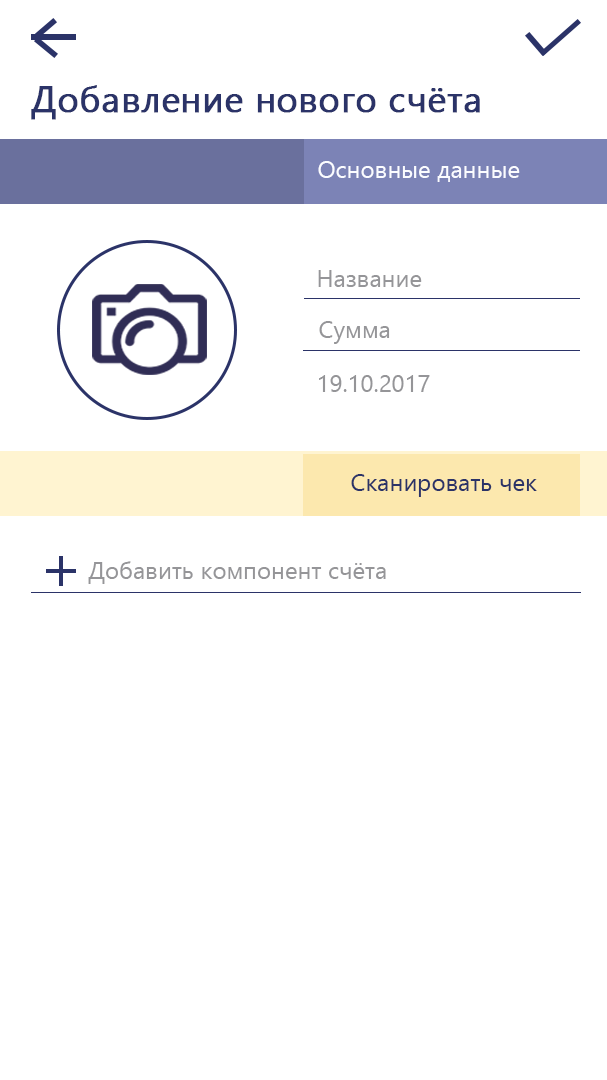
<style>
.page{position:relative;width:607px;height:1080px;background:#ffffff}
.page>*{position:absolute;margin:0}
.t1{font:36px "YuGothicUI-Regular";color:#2b3368;font-weight:bold}
.t2{font:24px "YuGothicUI-Regular";color:#fbfcff}
.t3{font:24px "YuGothicUI-Regular";color:#959598}
.t4{font:24px "YuGothicUI-Regular";color:#2b3368}
</style>
<div class="page">
<p class="t1" style="left:31px;top:85px;width:449px;height:35px">Добавление нового счёта</p>
<p class="t2" style="left:318px;top:161px;width:202px;height:21px">Основные данные</p>
<p class="t3" style="left:318px;top:270px;width:104px;height:17px">Название</p>
<p class="t3" style="left:319px;top:321px;width:71px;height:23px">Сумма</p>
<p class="t3" style="left:319px;top:375px;width:111px;height:17px">19.10.2017</p>
<p class="t4" style="left:351px;top:474px;width:186px;height:23px">Сканировать чек</p>
<p class="t3" style="left:88px;top:561px;width:298px;height:23px">Добавить компонент счёта</p>
</div>
